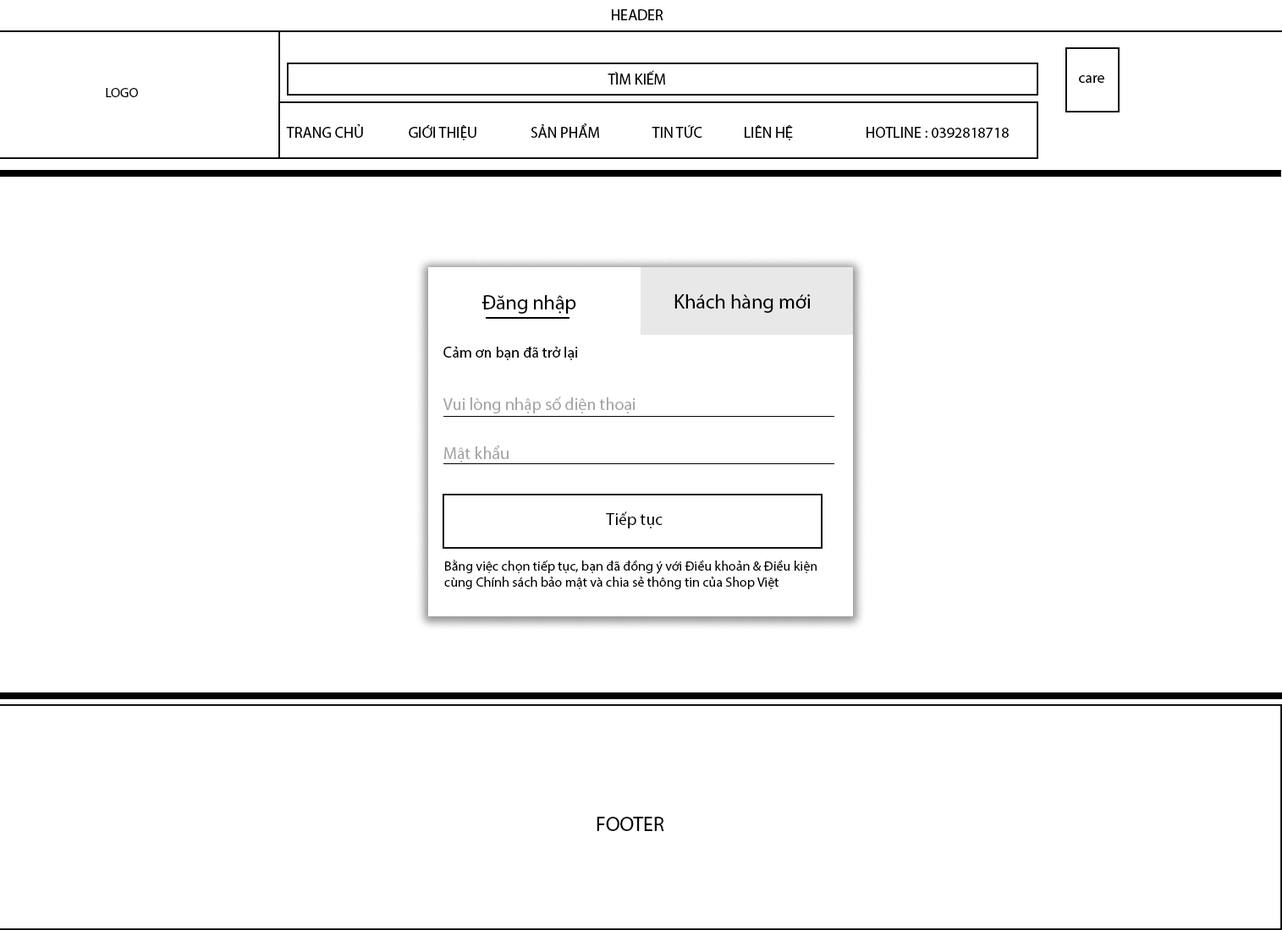
<style>
.page{position:relative;width:1282px;height:930px;background:#ffffff}
.page>*{position:absolute;margin:0}
.t1{font:15.2px "MyriadPro-Regular";color:#000000}
.t2{font:13.5px "MyriadPro-Regular";color:#000000}
.t3{font:20.3px "MyriadPro-Regular";color:#000000}
.t4{font:16.9px "MyriadPro-Regular";color:#a3a3a3}
.t5{font:16.9px "MyriadPro-Regular";color:#000000}
.t6{font:20.3px "MyriadPro-Regular";color:#000000;text-transform:uppercase}
</style>
<div class="page">
<p class="t1" style="left:612px;top:9px;width:51px;height:11px">HEADER</p>
<p class="t1" style="left:607px;top:70px;width:58px;height:15px">TÌM KIẾM</p>
<p class="t1" style="left:1079px;top:75px;width:25px;height:8px">care</p>
<p class="t2" style="left:106px;top:88px;width:32px;height:9px">LOGO</p>
<p class="t1" style="left:286px;top:124px;width:722px;height:16px">TRANG CHỦ   GIỚI THIỆU  SẢN PHẨM   TIN TỨC  LIÊN HỆ   HOTLINE : 0392818718</p>
<p class="t3" style="left:481px;top:295px;width:95px;height:19px">Đăng nhập</p>
<p class="t3" style="left:674px;top:294px;width:136px;height:19px">Khách hàng mới</p>
<p class="t1" style="left:443px;top:346px;width:135px;height:14px">Cảm ơn bạn đã trở lại</p>
<p class="t4" style="left:442px;top:397px;width:193px;height:17px">Vui lòng nhập số điện thoại</p>
<p class="t4" style="left:444px;top:446px;width:64px;height:17px">Mật khẩu</p>
<p class="t5" style="left:606px;top:512px;width:56px;height:17px">Tiếp tục</p>
<p class="t2" style="left:444px;top:560px;width:372px;height:30px">Bằng việc chọn tiếp tục, bạn đã đồng ý với Điều khoản &amp; Điều kiện cùng Chính sách bảo mật và chia sẻ thông tin của Shop Việt</p>
<p class="t6" style="left:596px;top:817px;width:68px;height:15px">footer</p>
</div>
